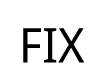
<style>
.page{position:relative;width:105px;height:83px;background:#ffffff}
.page>*{position:absolute;margin:0}
.t1{font:47.9px "DroidSans";color:#000000}
</style>
<div class="page">
<p class="t1" style="left:23px;top:28px;width:62px;height:35px">FIX</p>
</div>
